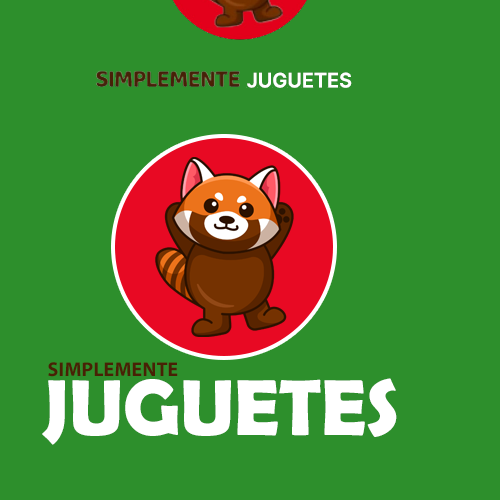
<style>
.page{position:relative;width:500px;height:500px;background:#2d8f2c}
.page>*{position:absolute;margin:0}
.t1{font:20px "MyriadPro-Bold";color:#482105}
.t2{font:80px "BerlinSansFBDemi-Bold";color:#ffffff}
</style>
<div class="page">
<p class="t1" style="left:48px;top:362px;width:130px;height:15px">SIMPLEMENTE</p>
<p class="t2" style="left:42px;top:378px;width:355px;height:67px">JUGUETES</p>
</div>
